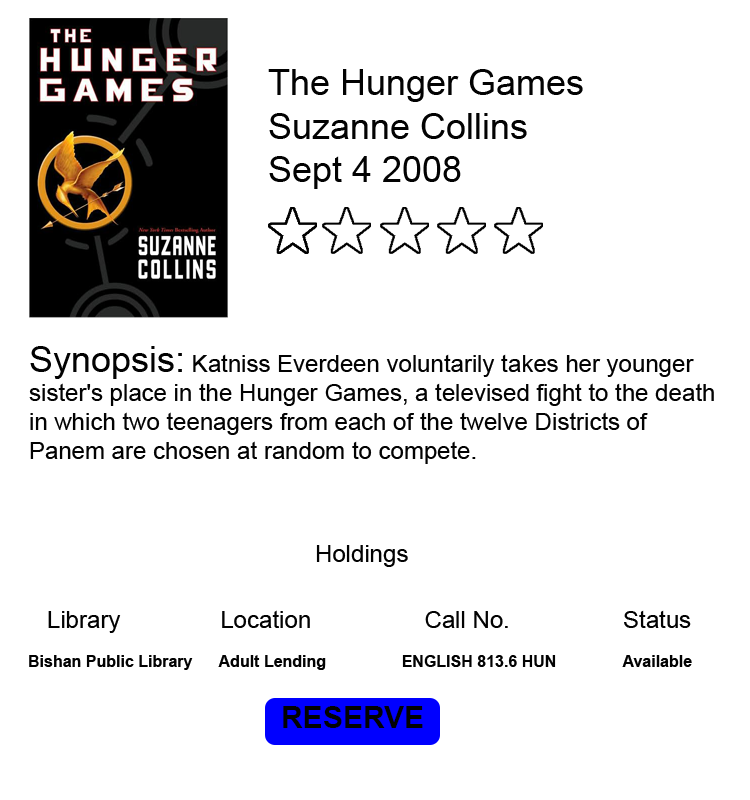
<style>
.page{position:relative;width:750px;height:800px;background:#ffffff}
.page>*{position:absolute;margin:0}
.t1{font:36px "ArialMT";color:#020202}
.t2{font:24px "ArialMT";color:#020202}
.t3{font:16px "Arial-BoldMT";color:#020202}
.t4{font:30px "Arial-BoldMT";color:#020202}
</style>
<div class="page">
<p class="t1" style="left:268px;top:69px;width:315px;height:120px">The Hunger Games<br>Suzanne Collins<br>Sept 4 2008</p>
<p class="t2" style="left:29px;top:346px;width:685px;height:118px"><span class="t1">Synopsis:</span> Katniss Everdeen voluntarily takes her younger sister's place in the Hunger Games, a televised fight to the death in which two teenagers from each of the twelve Districts of Panem are chosen at random to compete.</p>
<p class="t2" style="left:316px;top:545px;width:92px;height:22px">Holdings</p>
<p class="t2" style="left:48px;top:610px;width:643px;height:23px">Library               Location                 Call No.                 Status</p>
<p class="t3" style="left:29px;top:655px;width:663px;height:15px">Bishan Public Library      Adult Lending                 ENGLISH 813.6 HUN               Available</p>
<p class="t4" style="left:283px;top:706px;width:140px;height:22px">RESERVE NOW</p>
</div>
